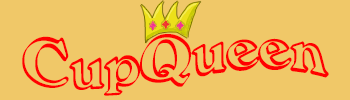
<style>
.page{position:relative;width:350px;height:100px;background:#f0c868}
.page>*{position:absolute;margin:0}
.t1{font:64px "Callistroke";color:#ff0000}
</style>
<div class="page">
<p class="t1" style="left:22px;top:34px;width:307px;height:62px">CupQueen</p>
</div>
